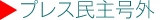
<style>
.page{position:relative;width:160px;height:20px;background:#ffffff}
.page>*{position:absolute;margin:0}
.t1{font:20px "NfMotoyaCedar-W1-90mskp-RKSJ-H";color:#006666}
</style>
<div class="page">
<p class="t1" style="left:21px;top:0px;width:134px;height:19px">プレス民主号外</p>
</div>
